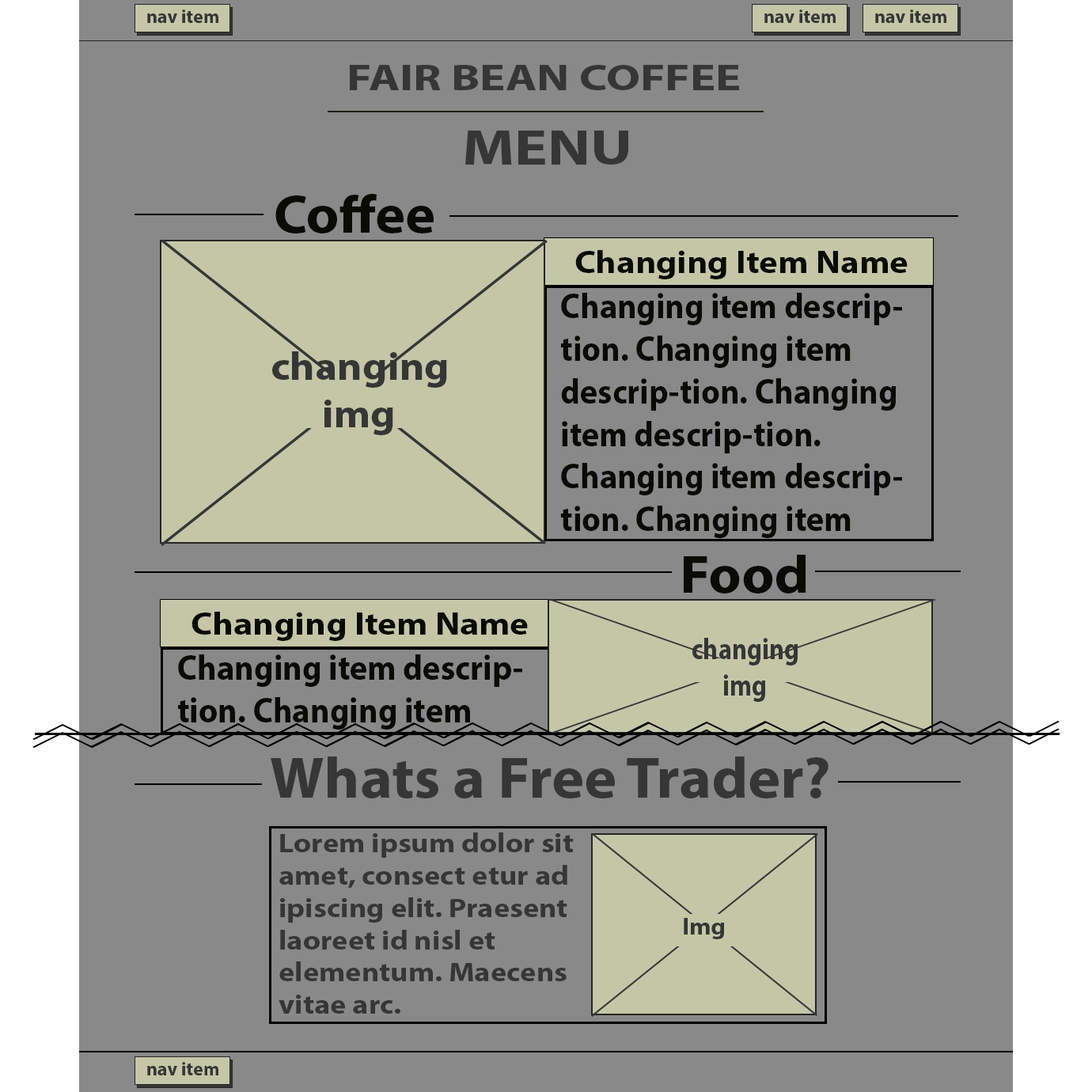
<style>
.page{position:relative;width:1092px;height:1092px;background:#898989}
.page>*{position:absolute;margin:0}
.t1{font:19px "MyriadPro-Bold";color:#363636}
.t2{font:36.4px "MyriadPro-Bold";color:#363636;scale:1.31 1}
.t3{font:49.1px "MyriadPro-Bold";color:#363636;scale:1.26 1}
.t4{font:53.7px "MyriadPro-Bold";color:#0a0b03;scale:1.05 1}
.t5{font:65px "MyriadPro-Bold";color:#0a0b03;scale:1.05 1}
.t6{font:31.9px "MyriadPro-Bold";color:#0a0b03;scale:1.12 1}
.t7{font:35.5px "MyriadPro-Bold";color:#0a0b03;scale:0.93 1}
.t8{font:39.7px "MyriadPro-Bold";color:#363636;scale:1.08 1}
.t9{font:54px "MyriadPro-Bold";color:#0a0b03;scale:1.06 1}
.t10{font:65.3px "MyriadPro-Bold";color:#0a0b03;scale:1.06 1}
.t11{font:31.9px "MyriadPro-Bold";color:#0a0b03;scale:1.13 1}
.t12{font:30px "MyriadPro-Bold";color:#363636;scale:0.86 1}
.t13{font:35.5px "MyriadPro-Bold";color:#0a0b03;scale:0.94 1}
.t14{font:58.2px "MyriadPro-Bold";color:#363636;scale:1.05 1}
.t15{font:26.9px "MyriadPro-Bold";color:#363636;scale:1.13 1}
.t16{font:23.8px "MyriadPro-Bold";color:#363636;scale:1.06 1}
</style>
<div class="page">
<p class="t1" style="left:147px;top:9px;width:71px;height:14px">nav item</p>
<p class="t1" style="left:764px;top:9px;width:72px;height:14px">nav item</p>
<p class="t1" style="left:875px;top:9px;width:71px;height:14px">nav item</p>
<p class="t2" style="left:350px;top:65px;width:389px;height:25px">FAIR BEAN COFFEE</p>
<p class="t3" style="left:465px;top:131px;width:163px;height:34px">MENU</p>
<p class="t4" style="left:275px;top:194px;width:159px;height:39px"><span class="t5">        </span>Coffee</p>
<p class="t6" style="left:575px;top:250px;width:333px;height:29px">Changing Item Name</p>
<p class="t7" style="left:561px;top:293px;width:341px;height:245px">Changing item descrip-<br>tion. Changing item <br>descrip-tion. Changing <br>item descrip-tion.<br>Changing item descrip-<br>tion. Changing item</p>
<p class="t8" style="left:272px;top:351px;width:175px;height:84px">changing<br> img</p>
<p class="t9" style="left:684px;top:555px;width:122px;height:38px"><span class="t10">        </span>Food</p>
<p class="t11" style="left:191px;top:612px;width:337px;height:29px">Changing Item Name</p>
<p class="t12" style="left:692px;top:638px;width:106px;height:64px">changing<br> img</p>
<p class="t13" style="left:178px;top:654px;width:344px;height:76px">Changing item descrip-<br>tion. Changing item</p>
<p class="t14" style="left:271px;top:756px;width:557px;height:42px">Whats a Free Trader?</p>
<p class="t15" style="left:279px;top:832px;width:295px;height:182px">Lorem ipsum dolor sit<br>amet, consect etur ad<br>ipiscing elit. Praesent <br>laoreet id nisl et <br>elementum. Maecens<br>vitae arc.</p>
<p class="t16" style="left:684px;top:918px;width:40px;height:21px">Img</p>
<p class="t1" style="left:147px;top:1062px;width:71px;height:13px">nav item</p>
</div>
